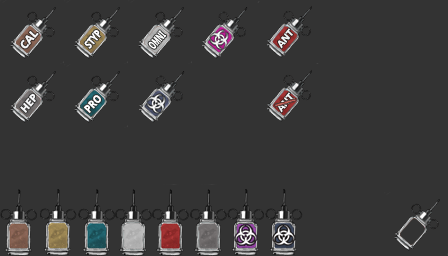
<style>
.page{position:relative;width:448px;height:256px;background:#333333}
.page>*{position:absolute;margin:0}
.t1{font:11.1px "NotoSans-Bold";color:#ffffff;scale:0.74 1}
.t2{font:11.2px "NotoSans-Bold";color:#f5f6f7}
.t3{font:10.4px "NotoSans-Bold";color:#f5f6f7}
.t4{font:11px "NotoSans-Bold";color:#ffffff;scale:0.85 1}
</style>
<div class="page">
<p class="t1" style="left:84px;top:30px;width:17px;height:19px;rotate:-50deg">STYP</p>
<p class="t2" style="left:20px;top:31px;width:19px;height:18px;rotate:-50deg">CAL</p>
<p class="t3" style="left:20px;top:93px;width:16px;height:20px;rotate:-50deg">HEP</p>
<p class="t4" style="left:83px;top:95px;width:18px;height:18px;rotate:-47deg">PRO</p>
</div>
